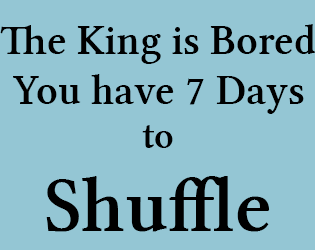
<style>
.page{position:relative;width:315px;height:250px;background:#94c6d4}
.page>*{position:absolute;margin:0}
.t1{font:41.7px "LinLibertineZ";color:#000000}
.t2{font:37.5px "LinLibertineZ";color:#000000}
.t3{font:79.2px "LinLibertineZ";color:#000000}
</style>
<div class="page">
<p class="t1" style="left:13px;top:74px;width:291px;height:40px">You have 7 Days</p>
<p class="t2" style="left:142px;top:125px;width:31px;height:23px">to</p>
<p class="t3" style="left:46px;top:176px;width:224px;height:56px">Shuffle</p>
</div>
